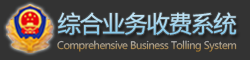
<style>
.page{position:relative;width:250px;height:60px;background:#333333}
.page>*{position:absolute;margin:0}
.t1{font:24px "SourceHanSansCN-Normal";letter-spacing:-0.08em}
.t2{font:10.1px "MicrosoftYaHei";letter-spacing:-0.04em}
</style>
<div class="page">
<p class="t1" style="left:58px;top:12px;width:178px;height:23px">综合业务收费系统</p>
<p class="t2" style="left:57px;top:40px;width:180px;height:12px">Comprehensive Business Tolling System</p>
</div>
